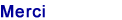
<style>
.page{position:relative;width:122px;height:20px;background:#ffffff}
.page>*{position:absolute;margin:0}
.t1{font:16.7px "ArialMT";letter-spacing:0.04em;color:#000099;font-weight:bold}
</style>
<div class="page">
<p class="t1" style="left:1px;top:5px;width:44px;height:13px">Merci</p>
</div>
